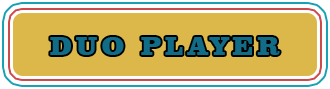
<style>
.page{position:relative;width:330px;height:89px;background:#dbb849}
.page>*{position:absolute;margin:0}
.t1{font:27px "ClarendonBT-Black";letter-spacing:0.15em;color:#116d87;text-transform:uppercase}
</style>
<div class="page">
<p class="t1" style="left:50px;top:37px;width:230px;height:18px">duo Player</p>
</div>
